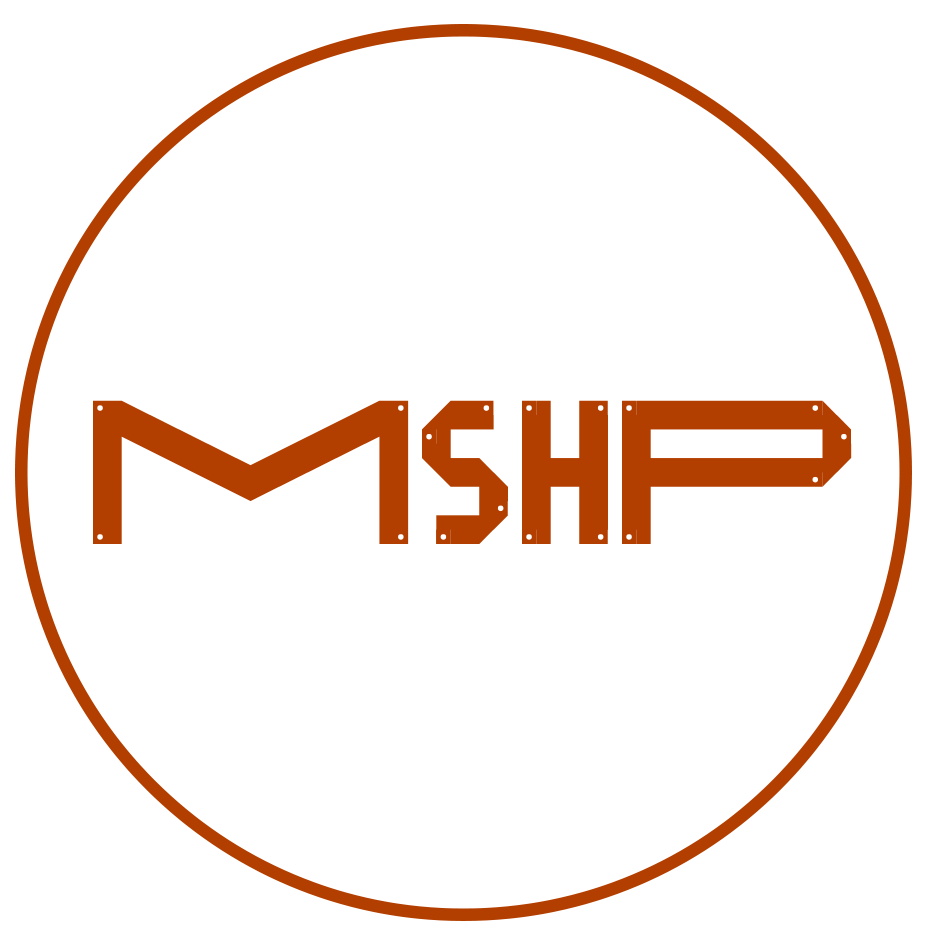
<style>
.page{position:relative;width:945px;height:945px;background:#ffffff}
.page>*{position:absolute;margin:0}
.t1{font:229.2px "Motorless-Drilled";color:#b23e00}
</style>
<div class="page">
<p class="t1" style="left:93px;top:400px;width:759px;height:144px">MshP</p>
</div>
